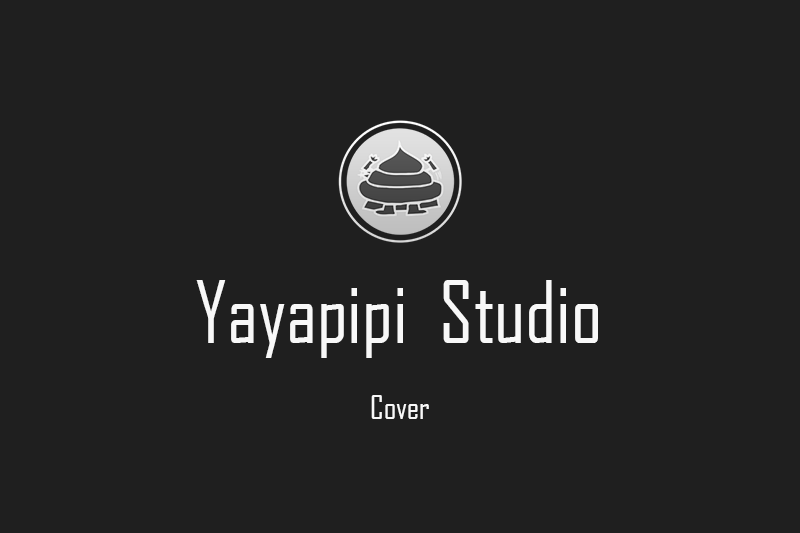
<style>
.page{position:relative;width:800px;height:533px;background:#1f1f1f}
.page>*{position:absolute;margin:0}
.t1{font:81.8px "AgencyFB-Reg";color:#f8f8f8}
.t2{font:32px "AgencyFB-Reg";color:#f8f8f8}
</style>
<div class="page">
<p class="t1" style="left:196px;top:280px;width:402px;height:78px">Yayapipi  Studio</p>
<p class="t2" style="left:371px;top:395px;width:58px;height:24px">Cover</p>
</div>
